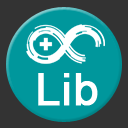
<style>
.page{position:relative;width:128px;height:128px;background:#00979c}
.page>*{position:absolute;margin:0}
.t1{font:45px "ArialMT";color:#ffffff;font-weight:bold}
</style>
<div class="page">
<p class="t1" style="left:38px;top:73px;width:60px;height:33px">Lib</p>
</div>
